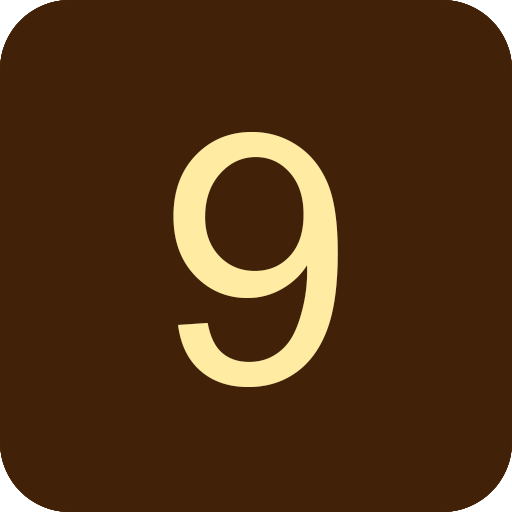
<style>
.page{position:relative;width:512px;height:512px;background:#412209}
.page>*{position:absolute;margin:0}
.t1{font:349px "ArialMT";color:#ffeba1}
</style>
<div class="page">
<p class="t1" style="left:173px;top:132px;width:165px;height:255px">9</p>
</div>
